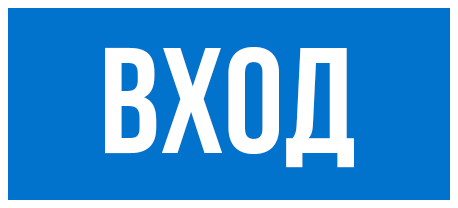
<style>
.page{position:relative;width:458px;height:208px;background:#0273cc}
.page>*{position:absolute;margin:0}
.t1{font:150px "BebasNeueBold";color:#ffffff}
</style>
<div class="page">
<p class="t1" style="left:105px;top:47px;width:249px;height:121px">вход</p>
</div>
